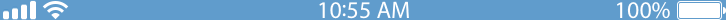
<style>
.page{position:relative;width:726px;height:20px;background:#609ccc}
.page>*{position:absolute;margin:0}
.t1{font:24px "MyriadPro-Regular";color:#ffffff}
</style>
<div class="page">
<p class="t1" style="left:319px;top:1px;width:90px;height:18px">10:55 AM</p>
<p class="t1" style="left:617px;top:2px;width:53px;height:17px">100%</p>
</div>
